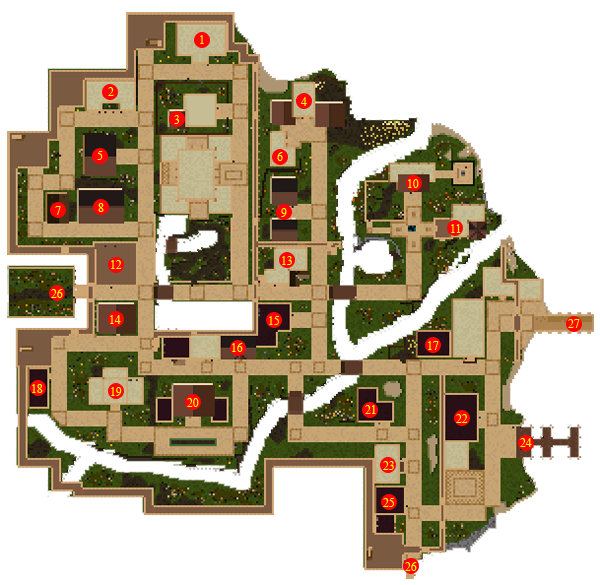
<style>
.page{position:relative;width:600px;height:585px;background:#ffffff}
.page>*{position:absolute;margin:0}
.t1{font:20px "TimesNewRomanPSMT";color:#fefb02}
</style>
<div class="page">
<p class="t1" style="left:200px;top:35px;width:4px;height:9px">1</p>
<p class="t1" style="left:108px;top:87px;width:6px;height:9px">2</p>
<p class="t1" style="left:301px;top:97px;width:6px;height:9px">4</p>
<p class="t1" style="left:174px;top:115px;width:6px;height:9px">3</p>
<p class="t1" style="left:97px;top:151px;width:6px;height:9px">5</p>
<p class="t1" style="left:277px;top:152px;width:6px;height:9px">6</p>
<p class="t1" style="left:408px;top:179px;width:11px;height:9px">10</p>
<p class="t1" style="left:55px;top:206px;width:6px;height:9px">7</p>
<p class="t1" style="left:98px;top:203px;width:6px;height:9px">8</p>
<p class="t1" style="left:281px;top:208px;width:6px;height:9px">9</p>
<p class="t1" style="left:451px;top:224px;width:10px;height:9px">11</p>
<p class="t1" style="left:282px;top:256px;width:10px;height:9px">13</p>
<p class="t1" style="left:111px;top:260px;width:11px;height:9px">12</p>
<p class="t1" style="left:51px;top:289px;width:12px;height:9px">26</p>
<p class="t1" style="left:110px;top:315px;width:11px;height:9px">14</p>
<p class="t1" style="left:269px;top:316px;width:10px;height:9px">15</p>
<p class="t1" style="left:568px;top:319px;width:12px;height:9px">27</p>
<p class="t1" style="left:428px;top:341px;width:11px;height:9px">17</p>
<p class="t1" style="left:232px;top:343px;width:11px;height:9px">16</p>
<p class="t1" style="left:32px;top:384px;width:11px;height:9px">18</p>
<p class="t1" style="left:111px;top:387px;width:11px;height:9px">19</p>
<p class="t1" style="left:187px;top:398px;width:12px;height:9px">20</p>
<p class="t1" style="left:365px;top:405px;width:11px;height:9px">21</p>
<p class="t1" style="left:456px;top:414px;width:12px;height:9px">22</p>
<p class="t1" style="left:520px;top:438px;width:12px;height:9px">24</p>
<p class="t1" style="left:383px;top:461px;width:11px;height:9px">23</p>
<p class="t1" style="left:383px;top:498px;width:11px;height:9px">25</p>
<p class="t1" style="left:405px;top:562px;width:12px;height:9px">26</p>
</div>
